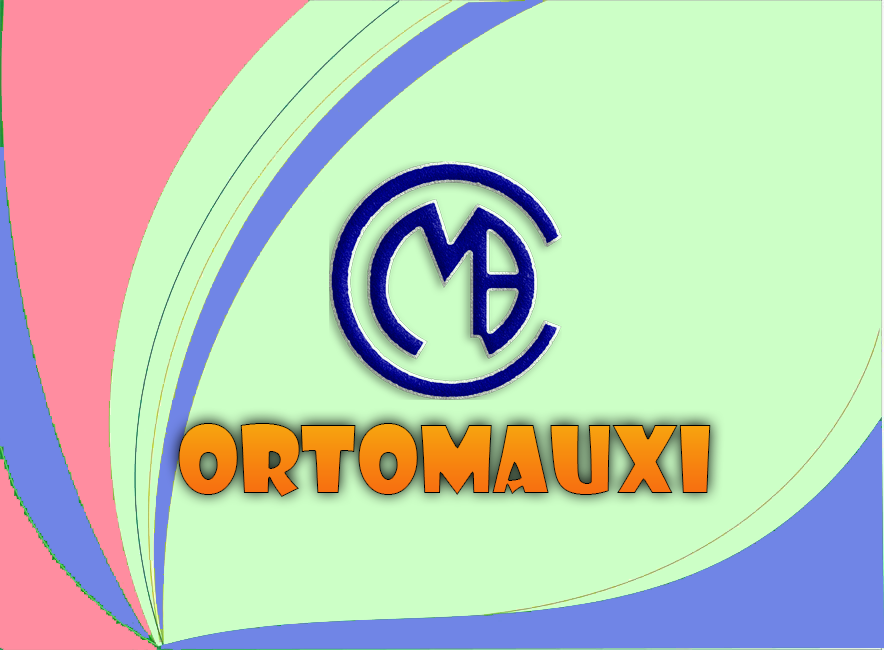
<style>
.page{position:relative;width:884px;height:650px;background:#ccffc6}
.page>*{position:absolute;margin:0}
.t1{font:90px "ShowcardGothic-Reg";color:#f7870f}
</style>
<div class="page">
<p class="t1" style="left:178px;top:423px;width:533px;height:74px">ORTOMAUXI</p>
</div>
